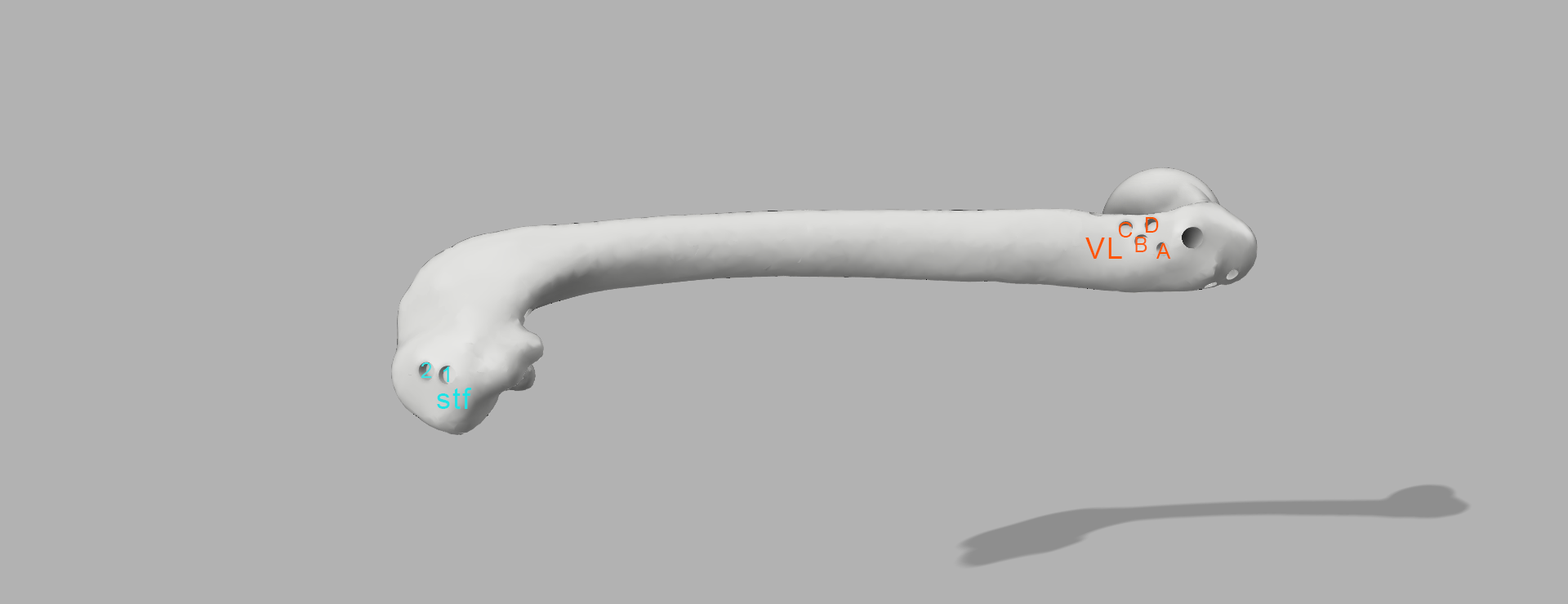
<style>
.page{position:relative;width:1568px;height:604px;background:#b2b2b2}
.page>*{position:absolute;margin:0}
.t1{font:21.2px "ArialMT";letter-spacing:0.06em;color:#ff5400}
.t2{font:29.4px "ArialMT";letter-spacing:0.06em;color:#ff5400}
.t3{font:21.2px "ArialMT";letter-spacing:0.06em;color:#fb5e18}
.t4{font:21.2px "ArialMT";letter-spacing:0.06em;color:#3ee1e2}
.t5{font:21.2px "ArialMT";letter-spacing:0.06em;color:#1ce3e5}
.t6{font:29.4px "ArialMT";letter-spacing:0.06em;color:#1ce3e5}
</style>
<div class="page">
<p class="t1" style="left:1146px;top:217px;width:13px;height:16px">D</p>
<p class="t1" style="left:1118px;top:222px;width:15px;height:16px">C</p>
<p class="t2" style="left:1085px;top:238px;width:37px;height:21px">VL</p>
<p class="t3" style="left:1135px;top:237px;width:12px;height:15px">B</p>
<p class="t1" style="left:1156px;top:243px;width:15px;height:16px">A</p>
<p class="t4" style="left:421px;top:363px;width:11px;height:15px">2</p>
<p class="t5" style="left:443px;top:367px;width:6px;height:15px">1</p>
<p class="t6" style="left:437px;top:388px;width:35px;height:21px">stf</p>
</div>
